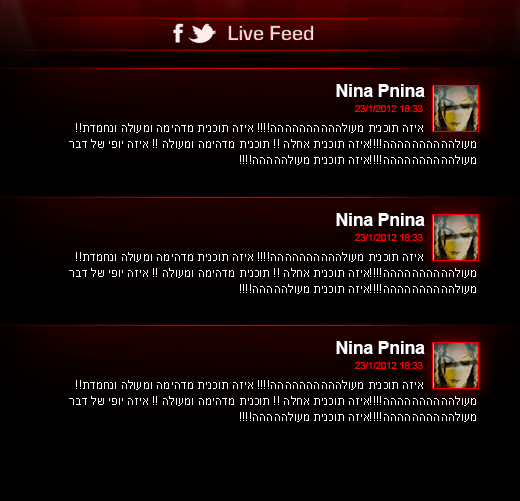
<style>
.page{position:relative;width:520px;height:501px;background:#000000}
.page>*{position:absolute;margin:0}
.t1{font:17.8px "Arial-BoldMT";letter-spacing:-0.01em;color:#ffffff}
.t2{font:9.7px "ArialMT";letter-spacing:-0.01em;color:#ff0000}
.t3{font:12px/16px "ArialMT";color:#ffffff}
</style>
<div class="page">
<p class="t1" style="left:336px;top:84px;width:89px;height:13px">Nina Pnina</p>
<p class="t2" style="left:354px;top:105px;width:69px;height:7px">18:33 23/1/2012</p>
<p class="t3" style="left:69px;top:123px;width:407px;height:42px;text-align:justify">איזה תוכנית מעולהההההההההה!!!! איזה תוכנית מדהימה ומעולה ונחמדת!! <br>מעולהההההההההה!!!!איזה תוכנית אחלה !! תוכנית מדהימה ומעולה !! איזה יופי של דבר<br>מעולהההההההההה!!!!איזה תוכנית מעולההההה!!!!</p>
<p class="t1" style="left:336px;top:213px;width:89px;height:13px">Nina Pnina</p>
<p class="t2" style="left:354px;top:234px;width:69px;height:7px">18:33 23/1/2012</p>
<p class="t3" style="left:69px;top:252px;width:407px;height:42px;text-align:justify">איזה תוכנית מעולהההההההההה!!!! איזה תוכנית מדהימה ומעולה ונחמדת!! <br>מעולהההההההההה!!!!איזה תוכנית אחלה !! תוכנית מדהימה ומעולה !! איזה יופי של דבר<br>מעולהההההההההה!!!!איזה תוכנית מעולההההה!!!!</p>
<p class="t1" style="left:336px;top:341px;width:89px;height:13px">Nina Pnina</p>
<p class="t2" style="left:354px;top:362px;width:69px;height:7px">18:33 23/1/2012</p>
<p class="t3" style="left:69px;top:380px;width:407px;height:42px;text-align:justify">איזה תוכנית מעולהההההההההה!!!! איזה תוכנית מדהימה ומעולה ונחמדת!! <br>מעולהההההההההה!!!!איזה תוכנית אחלה !! תוכנית מדהימה ומעולה !! איזה יופי של דבר<br>מעולהההההההההה!!!!איזה תוכנית מעולההההה!!!!</p>
</div>
